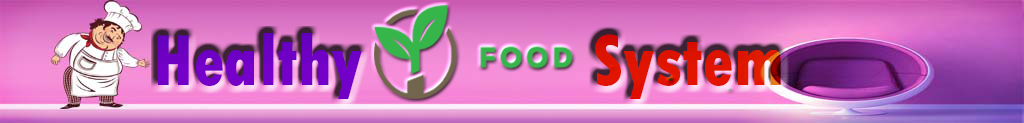
<style>
.page{position:relative;width:1024px;height:123px}
.page>*{position:absolute;margin:0}
.t1{font:75.8px "TwCenMT-CondensedExtraBold";scale:0.95 1}
</style>
<div class="page">
<p class="t1" style="left:158px;top:33px;width:623px;height:66px">Healthy             System</p>
</div>
